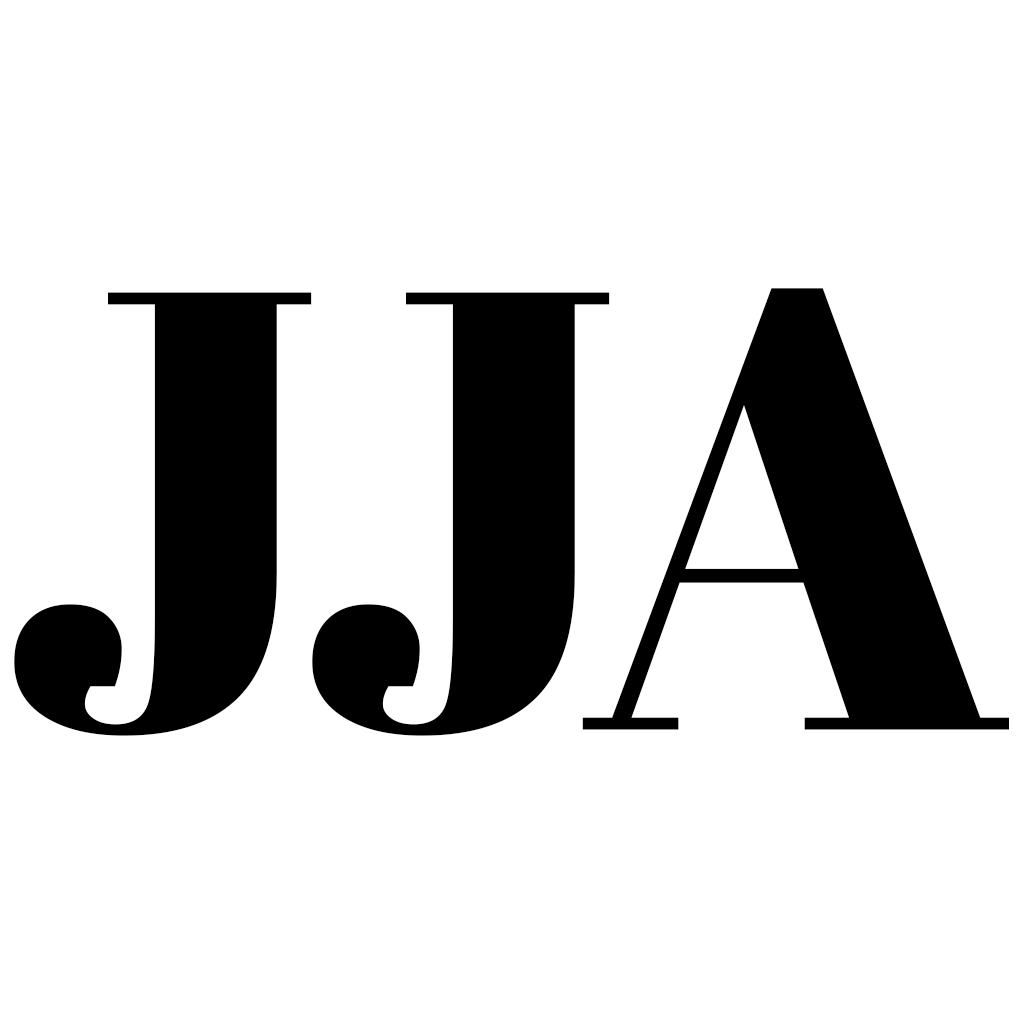
<style>
.page{position:relative;width:1024px;height:1024px;background:#ffffff}
.page>*{position:absolute;margin:0}
.t1{font:625px "AbrilFatface-Regular";color:#000000}
</style>
<div class="page">
<p class="t1" style="left:14px;top:288px;width:995px;height:448px">JJA</p>
</div>
